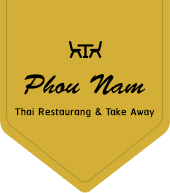
<style>
.page{position:relative;width:170px;height:193px;background:#d4af37}
.page>*{position:absolute;margin:0}
.t1{font:27.5px "BrushScriptStd";color:#000000}
.t2{font:13px "RSU-Bold";color:#000000}
</style>
<div class="page">
<p class="t1" style="left:24px;top:74px;width:122px;height:21px">Phou Nam</p>
<p class="t2" style="left:15px;top:108px;width:140px;height:10px">Thai Restaurang &amp; Take Away</p>
</div>
